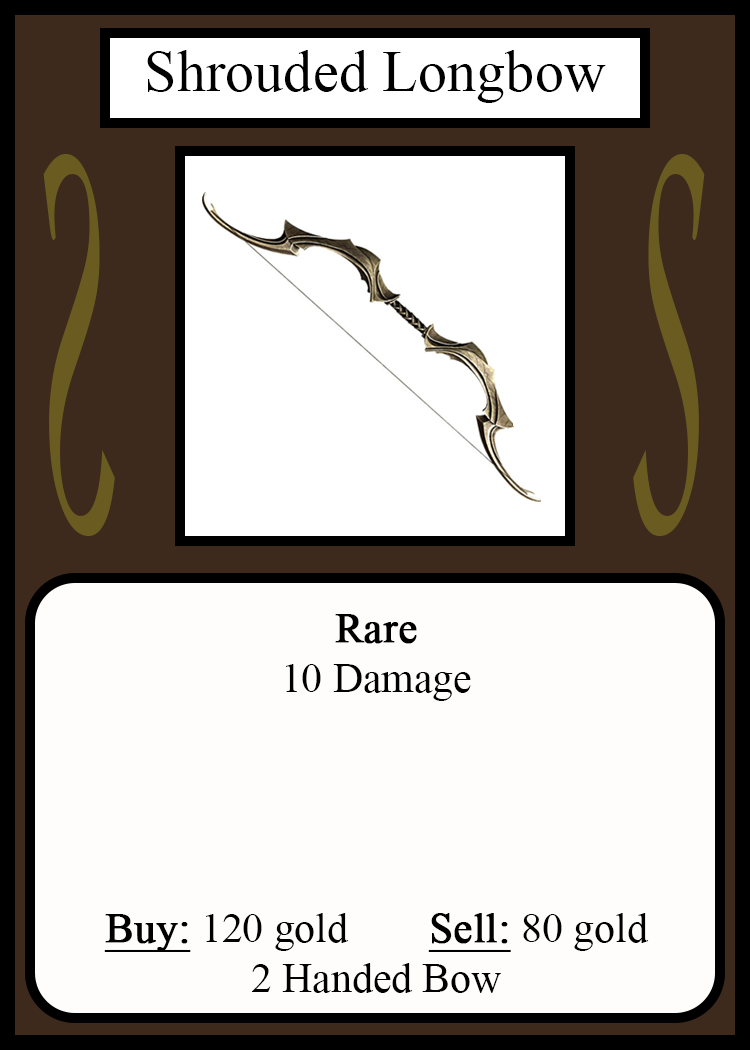
<style>
.page{position:relative;width:750px;height:1050px;background:#fffcfc}
.page>*{position:absolute;margin:0}
.t1{font:58.3px "TimesNewRomanPSMT";color:#010101}
.t2{font:548.5px "Apple-Chancery";color:#6a5c21;scale:0.27 1}
.t3{font:548.2px "Apple-Chancery";color:#6a5c21;scale:0.27 1}
.t4{font:41.7px "TimesNewRomanPSMT";color:#000000}
.t5{font:41.7px "TimesNewRomanPSMT";color:#000000;font-weight:bold}
.t6{font:41.7px "TimesNewRomanPSMT";color:#000000;font-weight:bold;text-decoration:underline}
</style>
<div class="page">
<p class="t1" style="left:147px;top:50px;width:459px;height:53px">Shrouded Longbow</p>
<p class="t2" style="left:43px;top:154px;width:72px;height:382px;rotate:180deg">S</p>
<p class="t3" style="left:633px;top:154px;width:72px;height:382px">S</p>
<p class="t4" style="left:104px;top:614px;width:545px;height:379px;text-align:center"><span class="t5">Rare<br></span>10 Damage<br><br><br><br><br><span class="t6">Buy:</span> 120 gold   <span class="t6">Sell:</span> 80 gold<br>2 Handed Bow</p>
</div>
